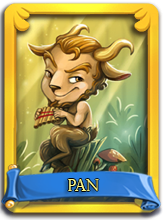
<style>
.page{position:relative;width:163px;height:220px}
.page>*{position:absolute;margin:0}
.t1{font:12px "PerpetuaTitlingMT-Light";color:#fffb8f}
</style>
<div class="page">
<p class="t1" style="left:68px;top:179px;width:31px;height:12px">Pan</p>
</div>
